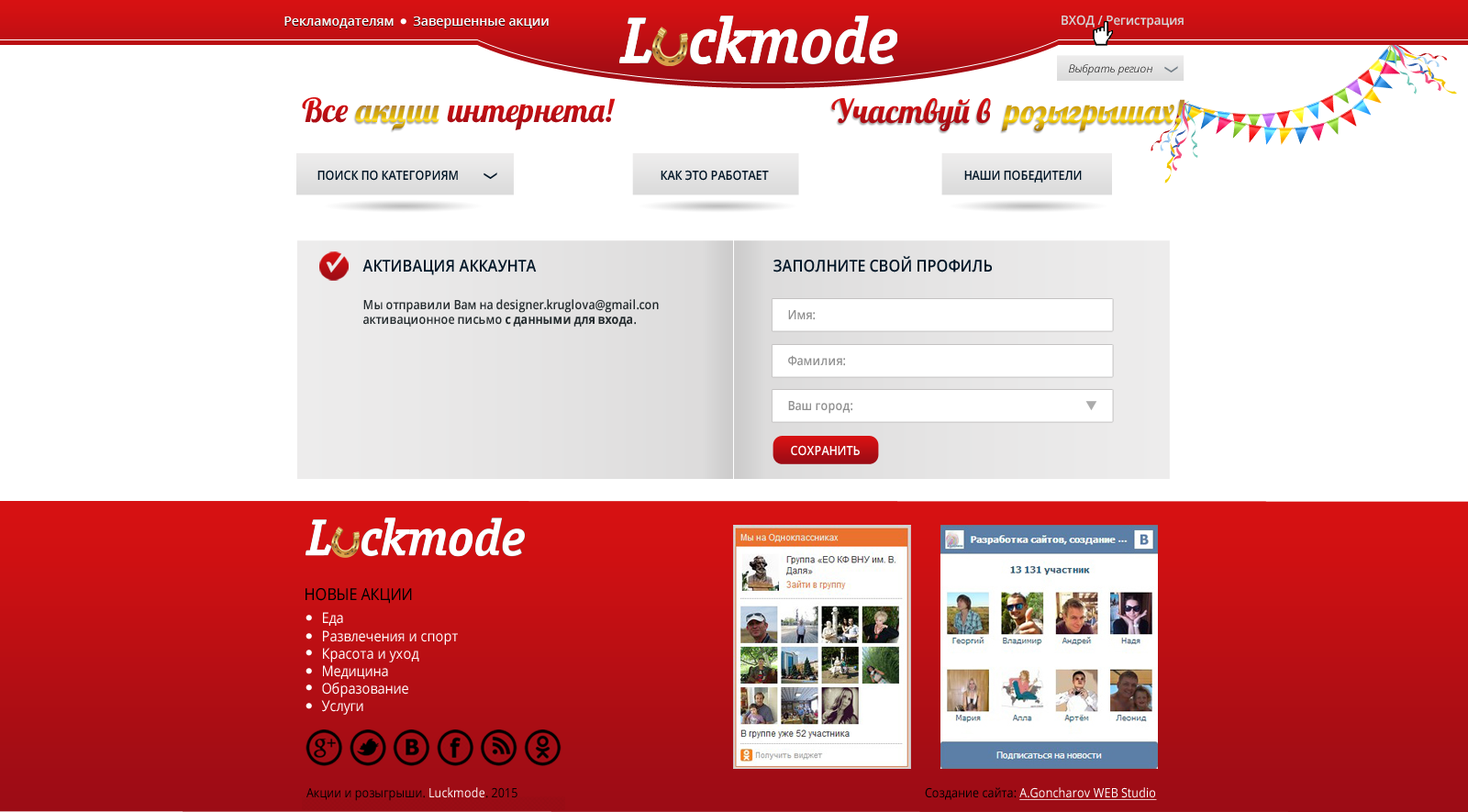
<style>
.page{position:relative;width:1468px;height:812px;background:#ffffff}
.page>*{position:absolute;margin:0}
.t1{font:12.8px "OpenSans-Semibold";color:#fdfffc}
.t2{font:12.8px "OpenSans-Semibold";color:#ffffff}
.t3{font:12.8px "OpenSans-Semibold";color:#d6d5d5;scale:0.95 1}
.t4{font:11px "OpenSansLight-Italic"}
.t5{font:33px "Lobster";color:#bc0f13}
.t6{font:33px "Lobster"}
.t7{font:12.8px "OpenSans-Semibold";color:#011627;text-transform:uppercase;scale:0.9 1}
.t8{font:16.5px "OpenSans-Semibold";color:#011627;text-transform:uppercase;scale:0.9 1}
.t9{font:12.8px "OpenSans-Semibold";color:#242b2e;scale:0.9 1}
.t10{font:12.8px "OpenSans-Bold";color:#242b2e;scale:0.9 1}
.t11{font:12.8px "OpenSans-Semibold";color:#909090;scale:0.9 1}
.t12{font:12.8px "OpenSans-Semibold";color:#ffffff;text-transform:uppercase;scale:0.9 1}
</style>
<div class="page">
<p class="t1" style="left:284px;top:17px;width:110px;height:11px">Рекламодателям</p>
<p class="t2" style="left:413px;top:17px;width:136px;height:11px">Завершенные акции</p>
<p class="t3" style="left:1062px;top:15px;width:122px;height:13px">ВХОД / Регистрация</p>
<p class="t4" style="left:1069px;top:64px;width:84px;height:11px">Выбрать регион</p>
<p class="t5" style="left:302px;top:97px;width:314px;height:33px">Все              интернета!</p>
<p class="t5" style="left:831px;top:98px;width:160px;height:33px">Участвуй в</p>
<p class="t6" style="left:1001px;top:99px;width:185px;height:32px">розыгрышах!</p>
<p class="t6" style="left:355px;top:105px;width:85px;height:25px">акции</p>
<p class="t7" style="left:318px;top:170px;width:140px;height:11px">ПОИСК по категориям</p>
<p class="t7" style="left:661px;top:170px;width:108px;height:11px">Как это работает</p>
<p class="t7" style="left:964px;top:170px;width:118px;height:13px">наши победители</p>
<p class="t8" style="left:774px;top:256px;width:218px;height:17px">заполните свой профиль</p>
<p class="t8" style="left:362px;top:260px;width:175px;height:15px">Активация аккаунта</p>
<p class="t9" style="left:363px;top:299px;width:296px;height:28px">Мы отправили Вам на designer.kruglova@gmail.con активационное письмо <span class="t10">с данными для входа</span>.</p>
<p class="t11" style="left:788px;top:310px;width:27px;height:10px">Имя:</p>
<p class="t11" style="left:788px;top:355px;width:57px;height:11px">Фамилия:</p>
<p class="t11" style="left:788px;top:401px;width:65px;height:13px">Ваш город:</p>
<p class="t12" style="left:791px;top:445px;width:69px;height:11px">сохранить</p>
</div>
